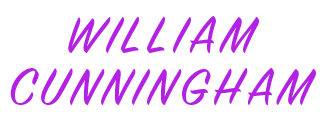
<style>
.page{position:relative;width:328px;height:120px;background:#ffffff}
.page>*{position:absolute;margin:0}
.t1{font:57.3px/52.1px "SignPainter-HouseScript";letter-spacing:0.1em;color:#b322e3;text-transform:uppercase}
</style>
<div class="page">
<p class="t1" style="left:10px;top:16px;width:306px;height:89px;text-align:center">William <br>Cunningham</p>
</div>
